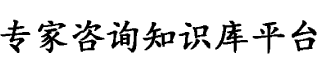
<style>
.page{position:relative;width:320px;height:75px;background:#ffffff}
.page>*{position:absolute;margin:0}
.t1{font:36px "¿¬Ìå";color:#000000;font-weight:bold}
</style>
<div class="page">
<p class="t1" style="left:0px;top:19px;width:317px;height:35px">专家咨询知识库平台</p>
</div>
